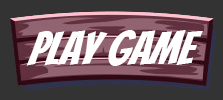
<style>
.page{position:relative;width:223px;height:100px;background:#333333}
.page>*{position:absolute;margin:0}
.t1{font:45.8px "Bangers-Regular";color:#ffffff;font-style:italic}
</style>
<div class="page">
<p class="t1" style="left:26px;top:30px;width:177px;height:36px">Play GAME</p>
</div>
